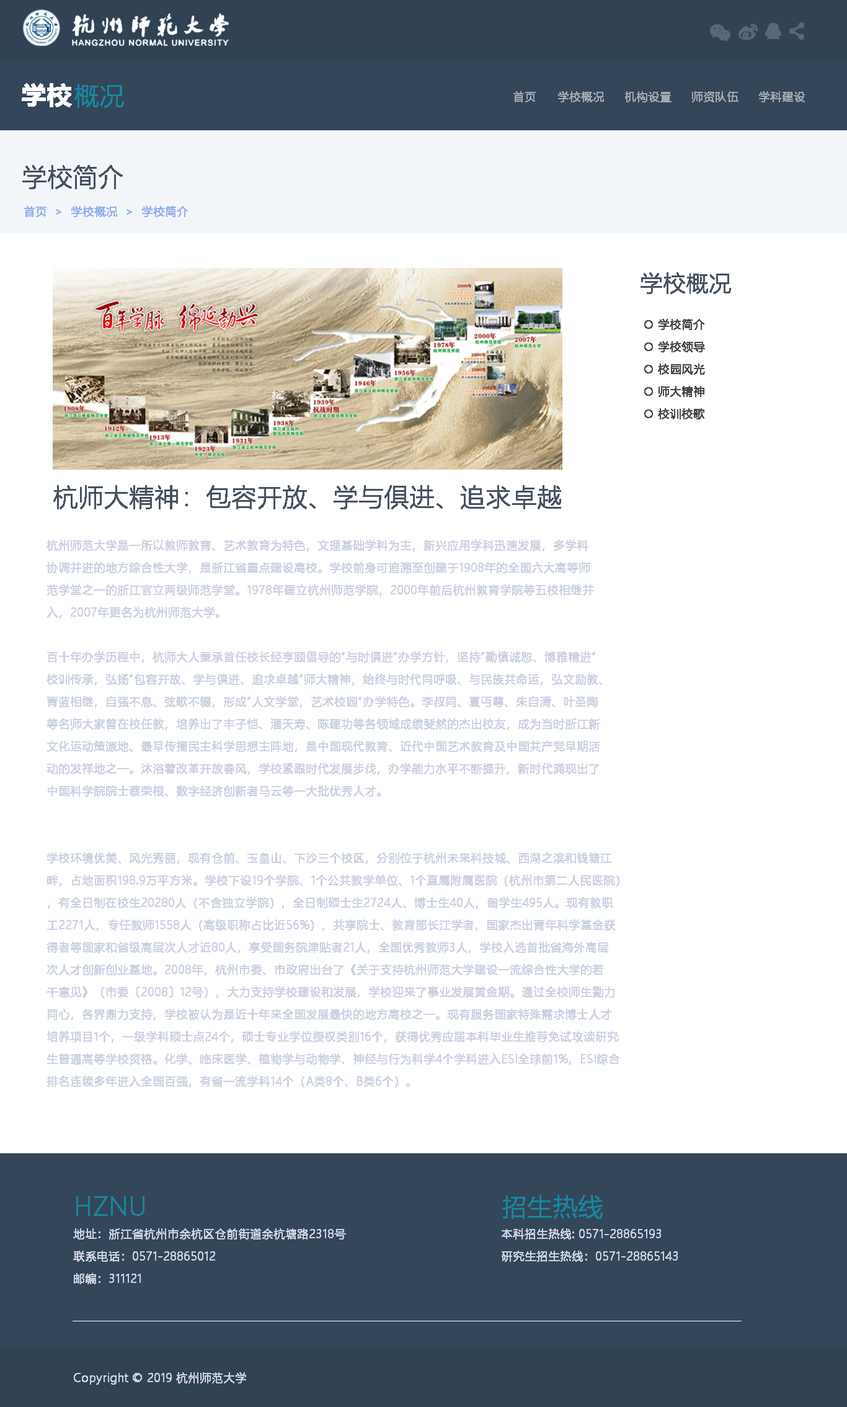
<style>
.page{position:relative;width:847px;height:1407px;background:#ffffff}
.page>*{position:absolute;margin:0}
.t1{font:24.8px "MicrosoftYaHei-Bold";color:#ffffff;font-weight:bold}
.t2{font:24.8px "MicrosoftYaHeiLight";color:#18869e;font-weight:bold}
.t3{font:11.2px "MicrosoftYaHeiLight";color:#a3a7b3;font-weight:bold}
.t4{font:24.8px "MicrosoftYaHeiLight";color:#465260;font-weight:bold}
.t5{font:11.2px "MicrosoftYaHeiLight";color:#92aff3;font-weight:bold}
.t6{font:22.3px "MicrosoftYaHeiLight";color:#465260;font-weight:bold}
.t7{font:11.2px/22.3px "MicrosoftYaHeiLight";color:#484848;font-weight:bold}
.t8{font:11.2px/22.3px "MicrosoftYaHeiLight";color:#ccd2e2;font-weight:bold}
.t9{font:11.2px "MicrosoftYaHeiLight";color:#ccd2e2;font-weight:bold}
</style>
<div class="page">
<p class="t1" style="left:22px;top:83px;width:50px;height:24px">学校</p>
<p class="t2" style="left:74px;top:84px;width:50px;height:24px">概况</p>
<p class="t3" style="left:514px;top:91px;width:291px;height:11px">首页 学校概况 机构设置 师资队伍 学科建设</p>
<p class="t4" style="left:22px;top:165px;width:101px;height:24px">学校简介</p>
<p class="t5" style="left:24px;top:206px;width:164px;height:11px">首页  &gt;  学校概况  &gt;  学校简介</p>
<p class="t6" style="left:641px;top:272px;width:90px;height:22px">学校概况</p>
<p class="t7" style="left:645px;top:319px;width:60px;height:100px">○ 学校简介<br>○ 学校领导<br>○ 校园风光<br>○ 师大精神<br>○ 校训校歌</p>
<p class="t4" style="left:53px;top:485px;width:508px;height:24px">杭师大精神：包容开放、学与俱进、追求卓越</p>
<p class="t8" style="left:47px;top:540px;width:573px;height:548px">杭州师范大学是一所以教师教育、艺术教育为特色，文理基础学科为主，新兴应用学科迅速发展，多学科<br>协调并进的地方综合性大学，是浙江省重点建设高校。学校前身可追溯至创建于1908年的全国六大高等师<br>范学堂之一的浙江官立两级师范学堂。1978年建立杭州师范学院，2000年前后杭州教育学院等五校相继并<br>入，2007年更名为杭州师范大学。<br><br>百十年办学历程中，杭师大人秉承首任校长经亨颐倡导的“与时俱进”办学方针，坚持“勤慎诚恕、博雅精进”<br>校训传承，弘扬“包容开放、学与俱进、追求卓越”师大精神，始终与时代同呼吸、与民族共命运，弘文励教、<br>青蓝相继，自强不息、弦歌不辍，形成“人文学堂，艺术校园”办学特色。李叔同、夏丏尊、朱自清、叶圣陶<br>等名师大家曾在校任教，培养出了丰子恺、潘天寿、陈建功等各领域成绩斐然的杰出校友，成为当时浙江新<br>文化运动策源地、最早传播民主科学思想主阵地，是中国现代教育、近代中国艺术教育及中国共产党早期活<br>动的发祥地之一。沐浴着改革开放春风，学校紧跟时代发展步伐，办学能力水平不断提升，新时代涌现出了<br>中国科学院院士蔡荣根、数字经济创新者马云等一大批优秀人才。<br><br><br>学校环境优美、风光秀丽，现有仓前、玉皇山、下沙三个校区，分别位于杭州未来科技城、西湖之滨和钱塘江<br>畔，占地面积198.9万平方米。学校下设19个学院、1个公共教学单位、1个直属附属医院（杭州市第二人民医院）<br>，有全日制在校生20280人（不含独立学院），全日制硕士生2724人、博士生40人，留学生495人。现有教职<br>工2271人，专任教师1558人（高级职称占比近56%），共享院士、教育部长江学者、国家杰出青年科学基金获<br>得者等国家和省级高层次人才近80人，享受国务院津贴者21人，全国优秀教师3人，学校入选首批省海外高层<br>次人才创新创业基地。2008年，杭州市委、市政府出台了《关于支持杭州师范大学建设一流综合性大学的若<br>干意见》（市委〔2008〕12号），大力支持学校建设和发展，学校迎来了事业发展黄金期。通过全校师生勠力<br>同心，各界鼎力支持，学校被认为是近十年来全国发展最快的地方高校之一。现有服务国家特殊需求博士人才<br>培养项目1个，一级学科硕士点24个，硕士专业学位授权类别16个，获得优秀应届本科毕业生推荐免试攻读研究<br>生普通高等学校资格。化学、临床医学、植物学与动物学、神经与行为科学4个学科进入ESI全球前1%，ESI综合<br>排名连续多年进入全国百强，有省一流学科14个（A类8个、B类6个）。</p>
<p class="t2" style="left:76px;top:1196px;width:69px;height:20px">HZNU</p>
<p class="t2" style="left:503px;top:1195px;width:100px;height:24px">招生热线</p>
<p class="t8" style="left:73px;top:1228px;width:273px;height:56px">地址：浙江省杭州市余杭区仓前街道余杭塘路2318号<br>联系电话：0571-28865012<br>邮编：311121</p>
<p class="t8" style="left:502px;top:1228px;width:176px;height:34px">本科招生热线: 0571-28865193 <br>研究生招生热线：0571-28865143</p>
<p class="t9" style="left:74px;top:1372px;width:172px;height:13px">Copyright © 2019 杭州师范大学</p>
</div>
